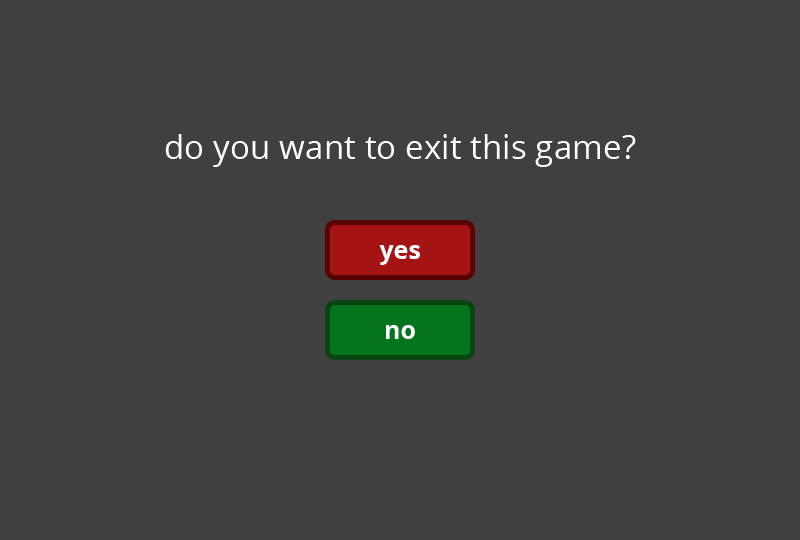
<style>
.page{position:relative;width:800px;height:540px;background:#404040}
.page>*{position:absolute;margin:0}
.t1{font:33.3px "OpenSans";color:#ffffff}
</style>
<div class="page">
<p class="t1" style="left:165px;top:134px;width:471px;height:33px">do you want to exit this game?</p>
</div>
